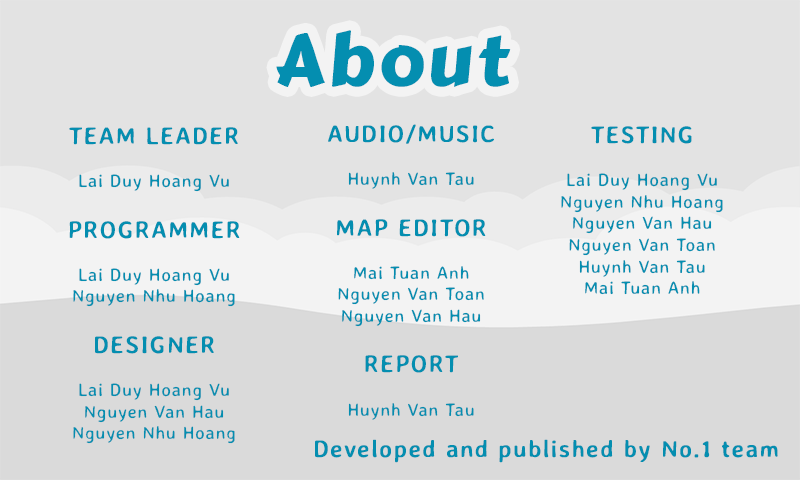
<style>
.page{position:relative;width:800px;height:480px;background:#e3e3e3}
.page>*{position:absolute;margin:0}
.t1{font:72px "CarterOne";letter-spacing:0.05em;color:#048eb0}
.t2{font:18px "AveriaSansLibre-Regular";letter-spacing:0.05em;color:#048eb0}
.t3{font:24px "AveriaSansLibre-Regular";letter-spacing:0.05em;color:#048eb0;font-weight:bold}
</style>
<div class="page">
<p class="t1" style="left:276px;top:30px;width:235px;height:57px">About</p>
<p class="t2" style="left:328px;top:124px;width:166px;height:296px;text-align:center"><span class="t3">AUDIO/MUSIC<br></span><br>Huynh Van Tau<br><br><span class="t3">MAP EDITOR<br></span><br>Mai Tuan Anh<br>Nguyen Van Toan<br>Nguyen Van Hau<br><br><span class="t3">REPORT<br></span><br>Huynh Van Tau</p>
<p class="t2" style="left:561px;top:126px;width:162px;height:169px;text-align:center"><span class="t3">TESTING<br></span><br>Lai Duy Hoang Vu<br>Nguyen Nhu Hoang<br>Nguyen Van Hau<br>Nguyen Van Toan<br>Huynh Van Tau<br>Mai Tuan Anh</p>
<p class="t2" style="left:69px;top:127px;width:171px;height:317px;text-align:center"><span class="t3">TEAM LEADER<br></span><br>Lai Duy Hoang Vu<br><br><span class="t3">PROGRAMMER<br></span><br>Lai Duy Hoang Vu<br>Nguyen Nhu Hoang<br><br><span class="t3">DESIGNER<br></span><br>Lai Duy Hoang Vu<br>Nguyen Van Hau<br>Nguyen Nhu Hoang</p>
<p class="t3" style="left:315px;top:439px;width:463px;height:24px">Developed and published by No.1 team</p>
</div>
